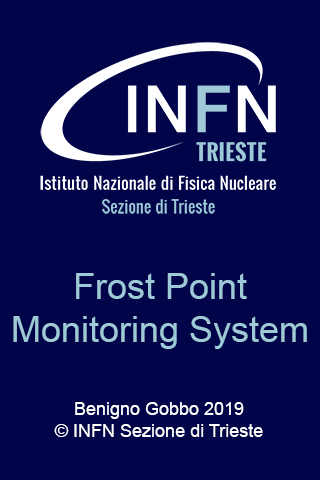
<style>
.page{position:relative;width:320px;height:480px;background:#010449}
.page>*{position:absolute;margin:0}
.t1{font:36px "ArialMT";color:#9ec9d7}
.t2{font:18px "ArialMT";color:#ffffff}
</style>
<div class="page">
<p class="t1" style="left:13px;top:273px;width:294px;height:76px;text-align:center">Frost Point<br>Monitoring System</p>
<p class="t2" style="left:54px;top:402px;width:209px;height:35px;text-align:center">Benigno Gobbo 2019<br>© INFN Sezione di Trieste</p>
</div>
